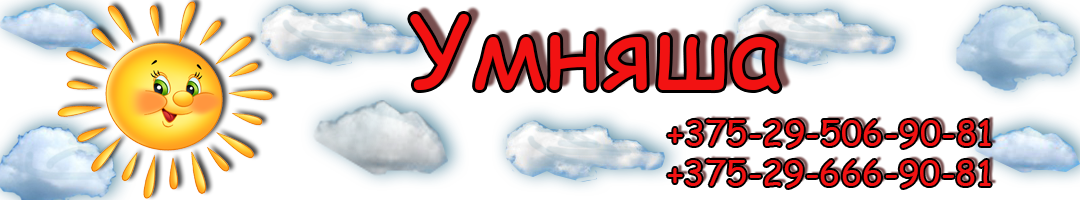
<style>
.page{position:relative;width:1080px;height:200px;background:#ffffff}
.page>*{position:absolute;margin:0}
.t1{font:99.9px "ComicSansMS";color:#f21212}
.t2{font:35px "ComicSansMS";color:#f21212}
</style>
<div class="page">
<p class="t1" style="left:410px;top:14px;width:370px;height:77px">Умняша</p>
<p class="t2" style="left:667px;top:119px;width:324px;height:29px">+375-29-506-90-81</p>
<p class="t2" style="left:667px;top:159px;width:324px;height:29px">+375-29-666-90-81</p>
</div>
